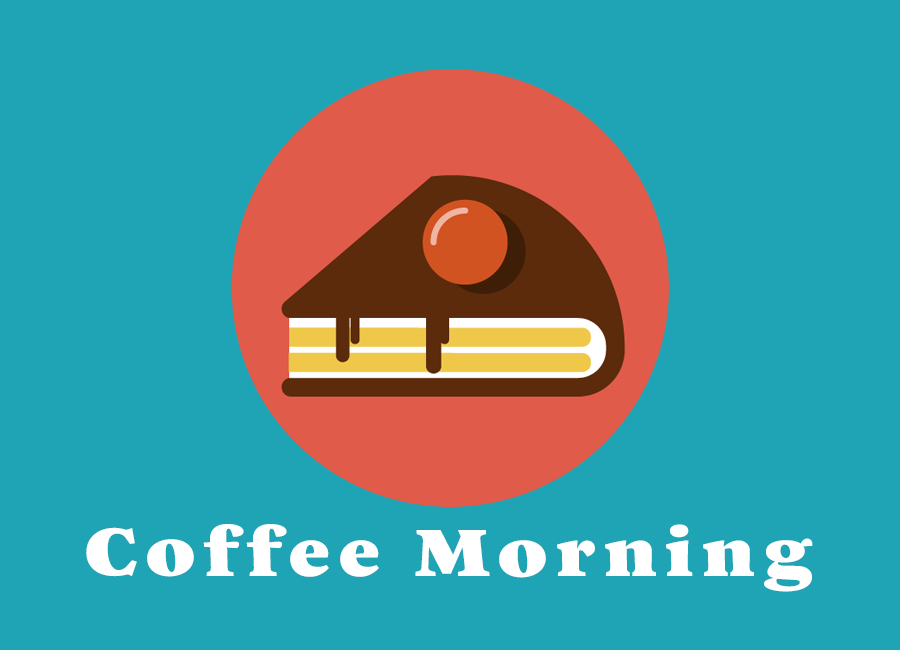
<style>
.page{position:relative;width:900px;height:650px;background:#1fa4b6}
.page>*{position:absolute;margin:0}
.t1{font:69.3px "Zenon-Black";letter-spacing:0.098em;color:#ffffff;scale:1.13 1}
</style>
<div class="page">
<p class="t1" style="left:86px;top:524px;width:727px;height:68px">Coffee Morning</p>
</div>
